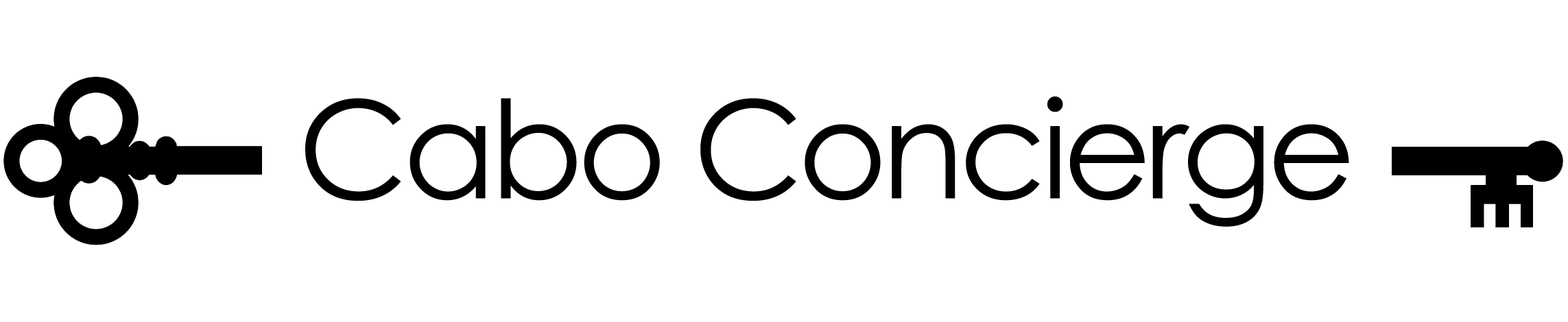
<style>
.page{position:relative;width:1568px;height:322px;background:#ffffff}
.page>*{position:absolute;margin:0}
.t1{font:135.8px "CenturyGothic";letter-spacing:-0.04em;color:#000000}
</style>
<div class="page">
<p class="t1" style="left:305px;top:96px;width:1044px;height:131px">Cabo Concierge</p>
</div>
